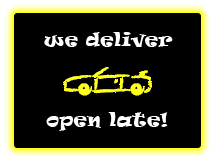
<style>
.page{position:relative;width:215px;height:162px;background:#000000}
.page>*{position:absolute;margin:0}
.t1{font:18px "Ravie";letter-spacing:0.025em;color:#ffffff}
</style>
<div class="page">
<p class="t1" style="left:44px;top:32px;width:129px;height:15px">we deliver</p>
<p class="t1" style="left:46px;top:112px;width:122px;height:19px">open late!</p>
</div>
